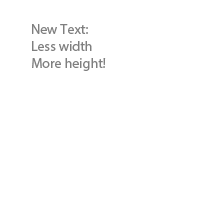
<style>
.page{position:relative;width:200px;height:200px;background:#ffffff}
.page>*{position:absolute;margin:0}
.t1{font:14px "MyriadPro-Regular";color:#7f7f7f}
</style>
<div class="page">
<p class="t1" style="left:32px;top:24px;width:74px;height:47px">New Text:<br>Less width<br>More height!</p>
</div>
